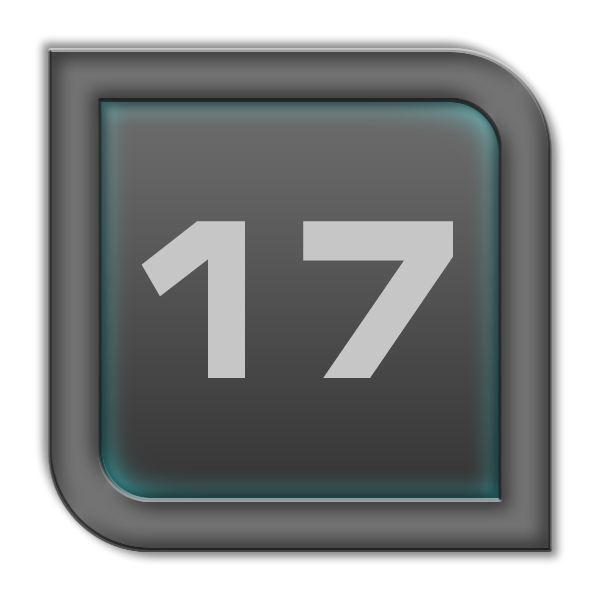
<style>
.page{position:relative;width:600px;height:600px;background:#ffffff}
.page>*{position:absolute;margin:0}
.t1{font:216px "EurostileLTStd-BoldEx2";color:#c6c6c6;scale:0.83 1}
</style>
<div class="page">
<p class="t1" style="left:141px;top:221px;width:312px;height:157px">17</p>
</div>
